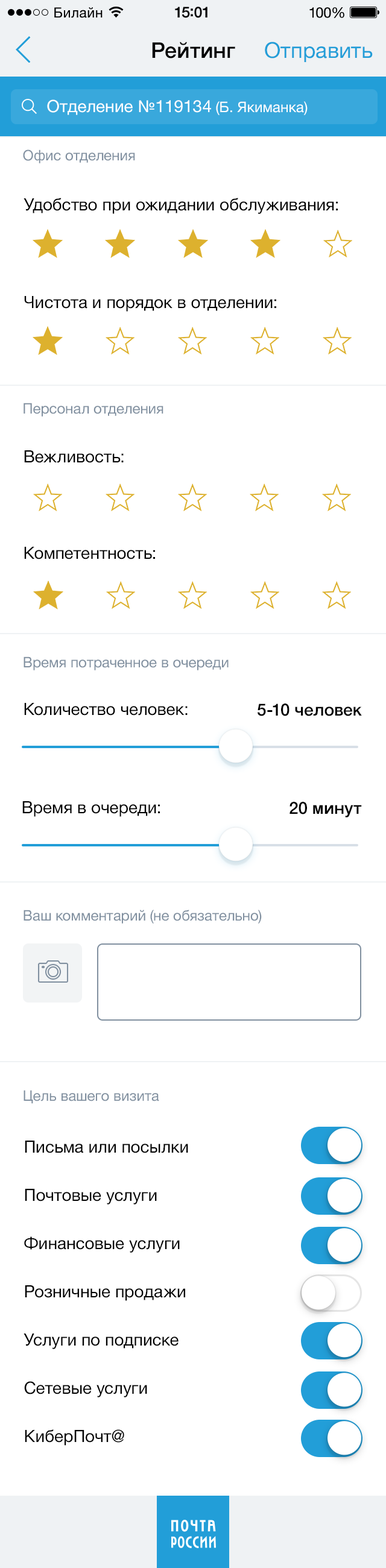
<style>
.page{position:relative;width:386px;height:1568px;background:#ffffff}
.page>*{position:absolute;margin:0}
.t1{font:21.7px "HelveticaNeue-Medium";color:#000000}
.t2{font:21.7px "HelveticaNeue";color:#229ed8}
.t3{font:16.9px "HelveticaNeue";color:#ffffff}
.t4{font:14.5px "HelveticaNeue";color:#ffffff}
.t5{font:14.5px "HelveticaNeue";color:#8190a0}
.t6{font:16.9px "HelveticaNeue";color:#000000}
.t7{font:16.9px "HelveticaNeue-Medium";color:#000000}
.t8{font:16.9px/24.1px "HelveticaNeue";color:#000000}
</style>
<div class="page">
<p class="t1" style="left:152px;top:42px;width:83px;height:16px">Рейтинг</p>
<p class="t2" style="left:265px;top:42px;width:108px;height:20px">Отправить</p>
<p class="t3" style="left:47px;top:99px;width:260px;height:16px">Отделение №119134<span class="t4"> (Б. Якиманка)</span></p>
<p class="t5" style="left:23px;top:150px;width:112px;height:13px">Офис отделения</p>
<p class="t6" style="left:24px;top:198px;width:314px;height:16px">Удобство при ожидании обслуживания:</p>
<p class="t6" style="left:24px;top:296px;width:252px;height:16px">Чистота и порядок в отделении:</p>
<p class="t5" style="left:24px;top:403px;width:139px;height:14px">Персонал отделения</p>
<p class="t6" style="left:24px;top:450px;width:100px;height:13px">Вежливость:</p>
<p class="t6" style="left:24px;top:547px;width:131px;height:12px">Компетентность:</p>
<p class="t5" style="left:24px;top:656px;width:204px;height:14px">Время потраченное в очереди</p>
<p class="t6" style="left:24px;top:703px;width:163px;height:13px">Количество человек:</p>
<p class="t7" style="left:257px;top:704px;width:105px;height:12px">5-10 человек</p>
<p class="t6" style="left:22px;top:801px;width:138px;height:16px">Время в очереди:</p>
<p class="t7" style="left:289px;top:802px;width:73px;height:15px">20 минут</p>
<p class="t5" style="left:24px;top:910px;width:238px;height:14px">Ваш комментарий (не обязательно)</p>
<p class="t5" style="left:24px;top:1090px;width:135px;height:14px">Цель вашего визита</p>
<p class="t8" style="left:24px;top:1141px;width:164px;height:305px">Письма или посылки<br>Почтовые услуги<br>Финансовые услуги<br>Розничные продажи<br>Услуги по подписке<br>Сетевые услуги<br>КиберПочт@</p>
</div>
